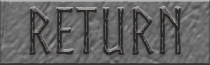
<style>
.page{position:relative;width:210px;height:65px}
.page>*{position:absolute;margin:0}
.t1{font:65px "Norse-Bold";color:#383635}
</style>
<div class="page">
<p class="t1" style="left:29px;top:6px;width:153px;height:50px">Return</p>
</div>
